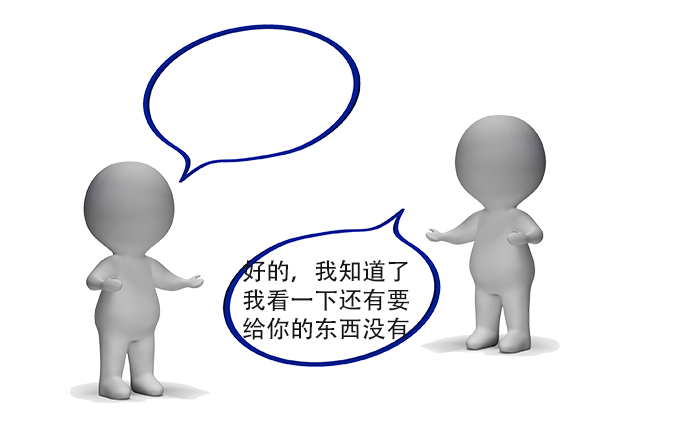
<style>
.page{position:relative;width:678px;height:421px;background:#ffffff}
.page>*{position:absolute;margin:0}
.t1{font:24px "AdobeHeitiStd-Regular";color:#151414}
</style>
<div class="page">
<p class="t1" style="left:243px;top:259px;width:166px;height:81px">好的，我知道了<br>我看一下还有要<br>给你的东西没有</p>
</div>
